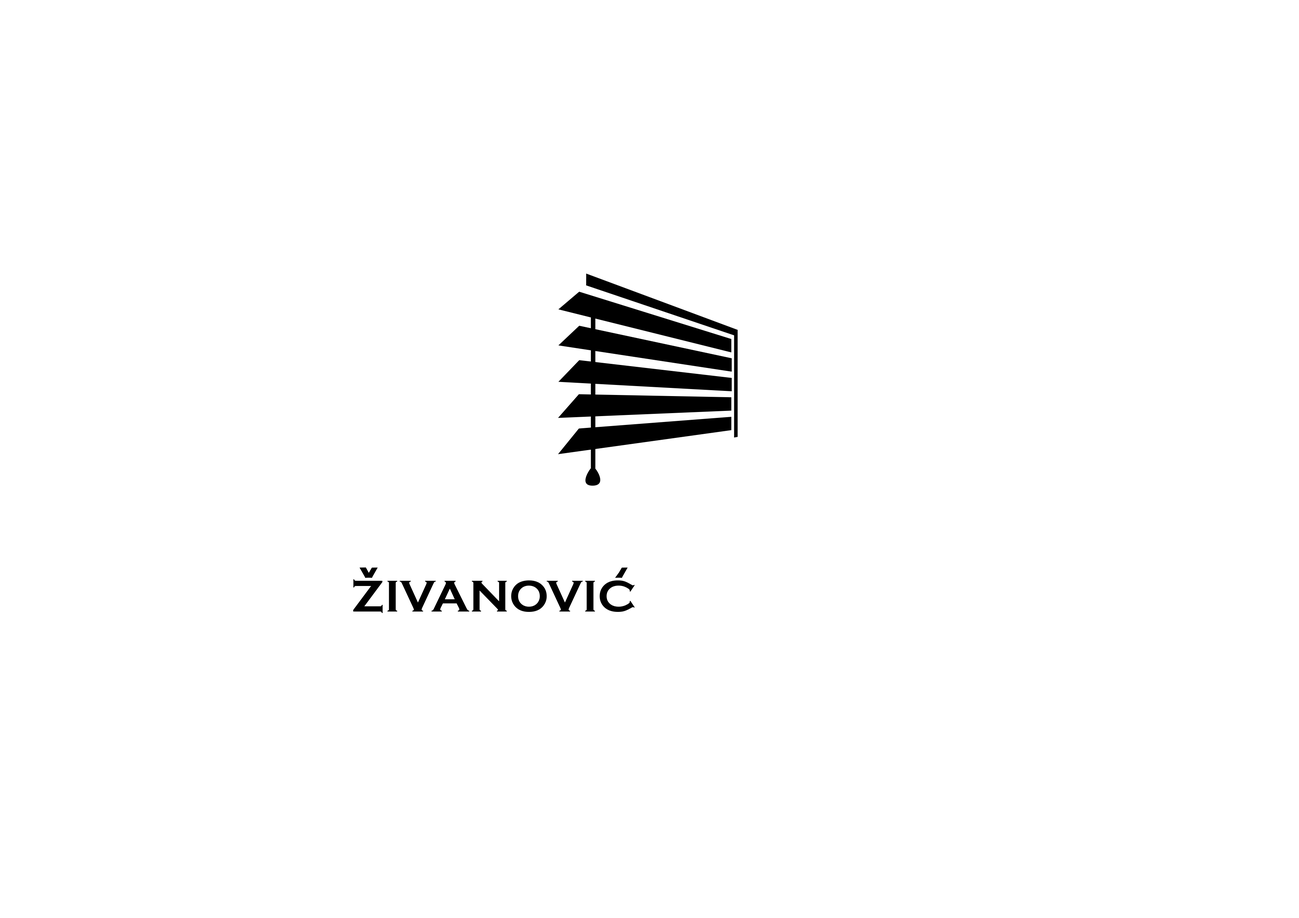
<style>
.page{position:relative;width:1299px;height:918px;background:#ffffff}
.page>*{position:absolute;margin:0}
.t1{font:46.3px "CopperplateGothic-Bold";color:#000000}
</style>
<div class="page">
<p class="t1" style="left:353px;top:579px;width:282px;height:34px">ZIVANOVIC</p>
</div>
